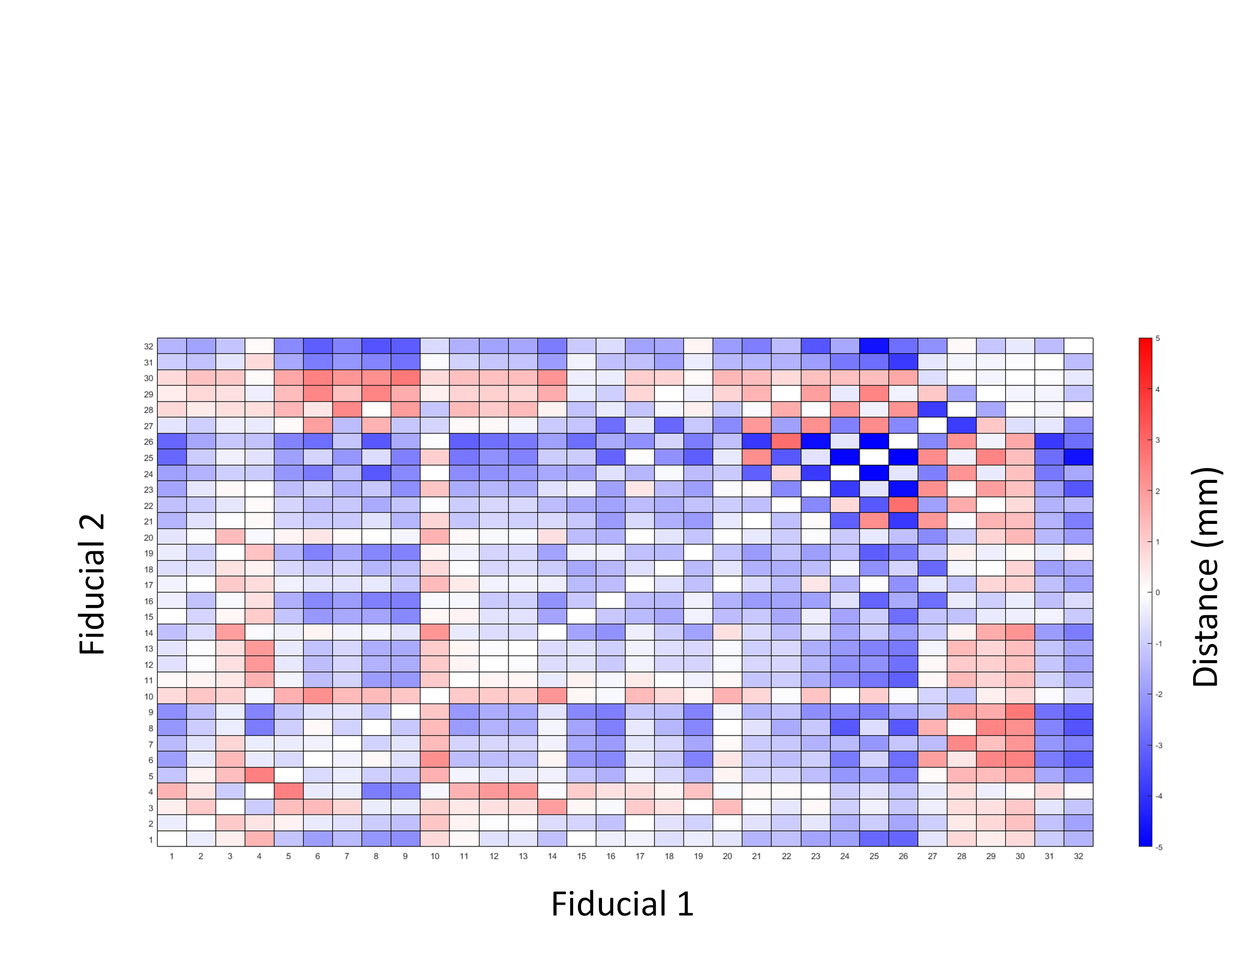
<style>
.page{position:relative;width:1246px;height:957px;background:#ffffff}
.page>*{position:absolute;margin:0}
.t1{font:37.9px "Calibri";color:#000000}
.t2{font:37.8px "Calibri";color:#000000}
</style>
<div class="page">
<p class="t1" style="left:1190px;top:468px;width:33px;height:218px;rotate:-90deg">Distance (mm)</p>
<p class="t1" style="left:78px;top:514px;width:26px;height:140px;rotate:-90deg">Fiducial 2</p>
<p class="t2" style="left:553px;top:890px;width:140px;height:26px">Fiducial 1</p>
</div>
